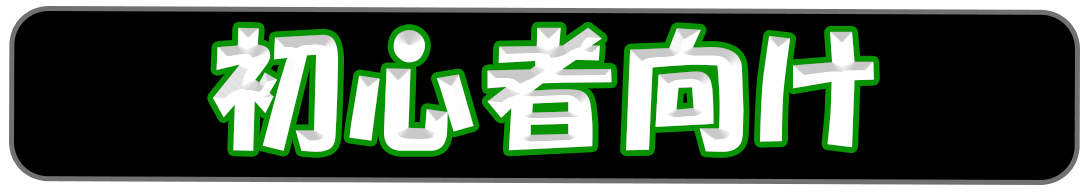
<style>
.page{position:relative;width:1089px;height:192px;background:#000000}
.page>*{position:absolute;margin:0}
.t1{font:130.2px "HGPSoeiKakupoptai";letter-spacing:0.05em;color:#ffffff}
</style>
<div class="page">
<p class="t1" style="left:213px;top:27px;width:661px;height:125px">初心者向け</p>
</div>
